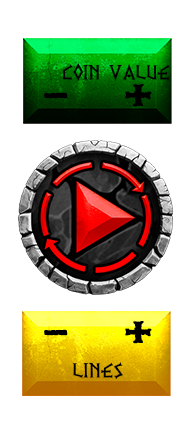
<style>
.page{position:relative;width:193px;height:424px;background:#ffffff}
.page>*{position:absolute;margin:0}
.t1{font:22px "PRViking";color:#000000;scale:1.09 1}
.t2{font:55px "PRViking";color:#000000;font-weight:bold;scale:1.1 1}
.t3{font:22px "PRViking";color:#000000;scale:1.1 1}
</style>
<div class="page">
<p class="t1" style="left:62px;top:63px;width:108px;height:18px">COIN VALUE</p>
<p class="t2" style="left:125px;top:84px;width:27px;height:23px">+</p>
<p class="t2" style="left:44px;top:92px;width:24px;height:7px">-</p>
<p class="t2" style="left:44px;top:329px;width:24px;height:7px">-</p>
<p class="t2" style="left:125px;top:321px;width:27px;height:23px">+</p>
<p class="t3" style="left:73px;top:362px;width:50px;height:17px">LINES</p>
</div>
